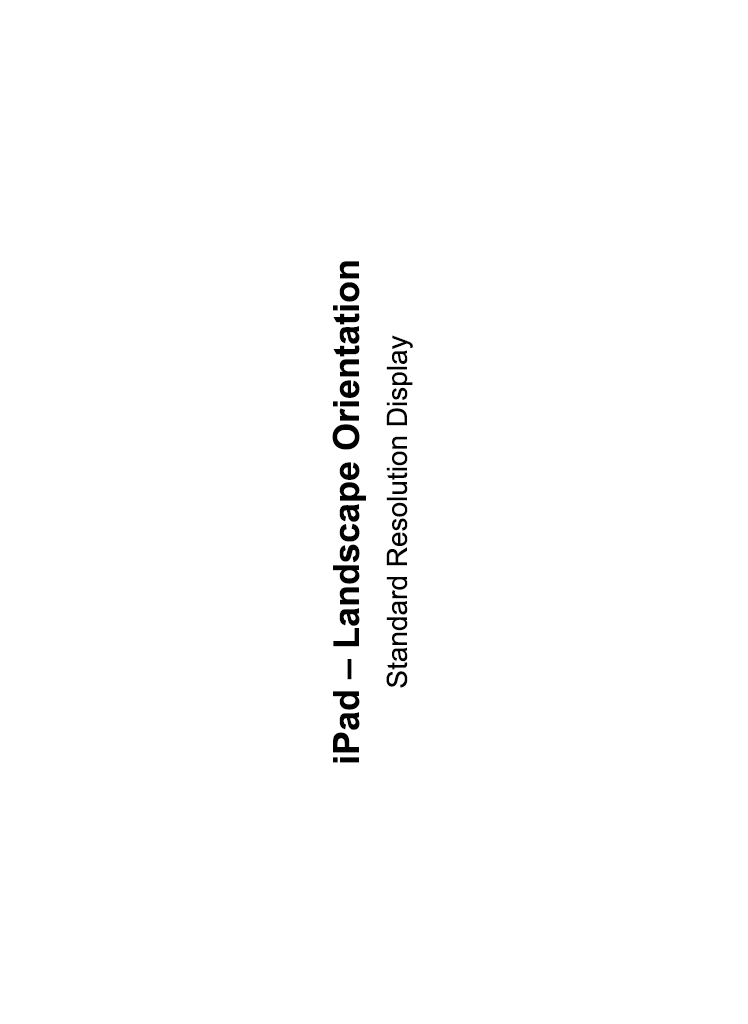
<style>
.page{position:relative;width:748px;height:1024px;background:#ffffff}
.page>*{position:absolute;margin:0}
.t1{font:36px/48px "Arial-BoldMT";color:#000000}
.t2{font:28px/48px "ArialMT";color:#000000}
</style>
<div class="page">
<p class="t1" style="left:332px;top:261px;width:81px;height:502px;text-align:center;rotate:-90deg">iPad – Landscape Orientation<br><span class="t2">Standard Resolution Display</span></p>
</div>
